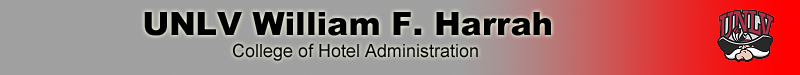
<style>
.page{position:relative;width:800px;height:75px}
.page>*{position:absolute;margin:0}
.t1{font:18px "ArialMT";color:#000000}
.t2{font:32px "Arial-Black";color:#000000}
</style>
<div class="page">
<p class="t1" style="left:144px;top:12px;width:407px;height:49px;text-align:center"><span class="t2">UNLV William F. Harrah <br></span> College of Hotel Administration</p>
</div>
